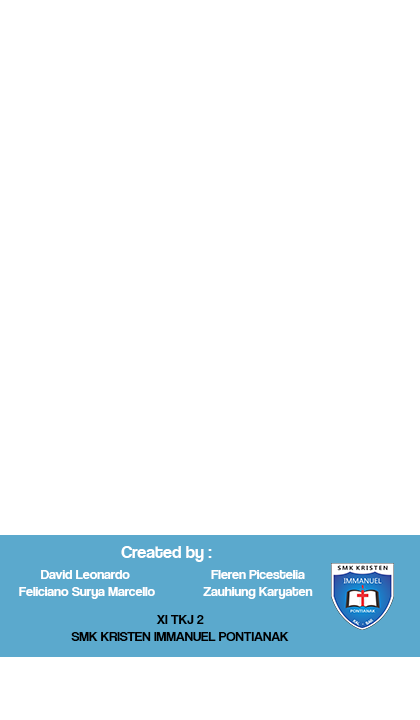
<style>
.page{position:relative;width:420px;height:720px;background:#ffffff}
.page>*{position:absolute;margin:0}
.t1{font:18px "CoolveticaRg-Regular";color:#ffffff}
.t2{font:14px "CoolveticaRg-Regular";color:#ffffff}
.t3{font:14px "CoolveticaRg-Regular";color:#000000}
</style>
<div class="page">
<p class="t1" style="left:121px;top:546px;width:91px;height:16px">Created by :</p>
<p class="t2" style="left:19px;top:570px;width:136px;height:29px;text-align:center">David Leonardo <br>Feliciano Surya Marcello</p>
<p class="t2" style="left:203px;top:570px;width:110px;height:29px;text-align:center">Fleren Picestelia<br>Zauhiung Karyaten</p>
<p class="t3" style="left:71px;top:615px;width:218px;height:26px;text-align:center">XI TKJ 2<br>SMK KRISTEN IMMANUEL PONTIANAK</p>
</div>
